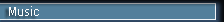
<style>
.page{position:relative;width:224px;height:22px;background:#527f9b}
.page>*{position:absolute;margin:0}
.t1{font:12.1px "Verdana";color:#ffffff;scale:0.91 1}
</style>
<div class="page">
<p class="t1" style="left:9px;top:6px;width:30px;height:10px">Music</p>
</div>
